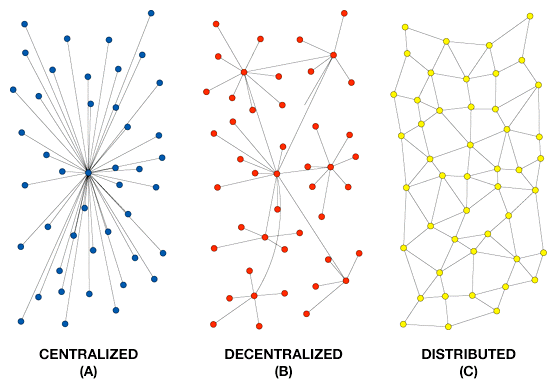
<style>
.page{position:relative;width:557px;height:389px;background:#ffffff}
.page>*{position:absolute;margin:0}
.t1{font:14px "HelveticaNeue-Bold";color:#000000}
</style>
<div class="page">
<p class="t1" style="left:39px;top:348px;width:99px;height:31px;text-align:center">CENTRALIZED<br>(A)</p>
<p class="t1" style="left:225px;top:348px;width:118px;height:31px;text-align:center">DECENTRALIZED<br>(B)</p>
<p class="t1" style="left:422px;top:348px;width:94px;height:31px;text-align:center">DISTRIBUTED<br>(C)</p>
</div>
